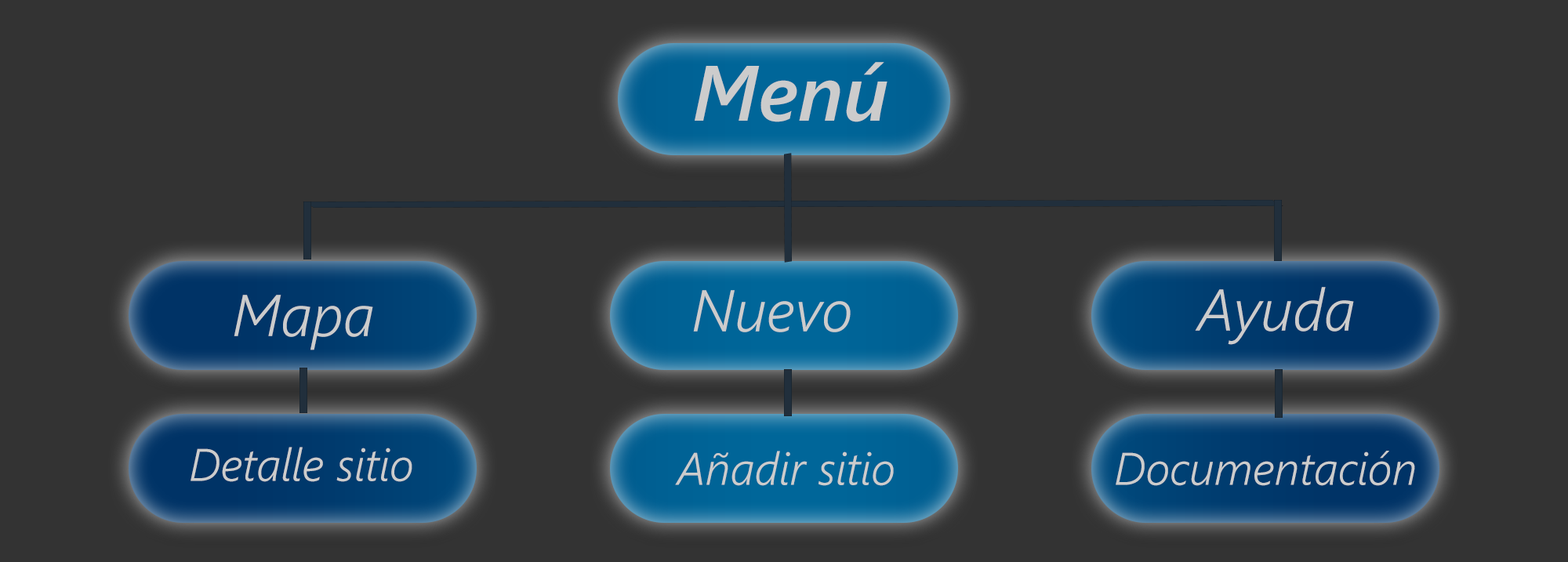
<style>
.page{position:relative;width:1568px;height:562px;background:#333333}
.page>*{position:absolute;margin:0}
.t1{font:78.4px "SegoeUI-SemiboldItalic";color:#cccccc}
.t2{font:58.8px "SegoeUI-SemilightItalic";color:#cccccc}
.t3{font:45.7px "SegoeUI-SemilightItalic";color:#cccccc}
</style>
<div class="page">
<p class="t1" style="left:695px;top:62px;width:192px;height:60px">Menú</p>
<p class="t2" style="left:693px;top:290px;width:158px;height:42px">Nuevo</p>
<p class="t2" style="left:1195px;top:287px;width:159px;height:58px">Ayuda</p>
<p class="t2" style="left:234px;top:295px;width:139px;height:55px">Mapa</p>
<p class="t3" style="left:191px;top:447px;width:221px;height:35px">Detalle sitio</p>
<p class="t3" style="left:675px;top:451px;width:219px;height:35px">Añadir sitio</p>
<p class="t3" style="left:1116px;top:451px;width:299px;height:35px">Documentación</p>
</div>
